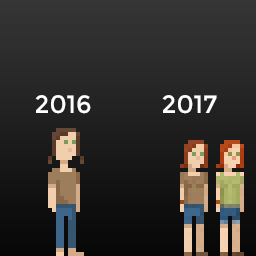
<style>
.page{position:relative;width:256px;height:256px}
.page>*{position:absolute;margin:0}
.t1{font:25px "Montserrat-Regular";color:#ffffff}
</style>
<div class="page">
<p class="t1" style="left:35px;top:95px;width:56px;height:19px">2016</p>
<p class="t1" style="left:162px;top:95px;width:55px;height:19px">2017</p>
</div>
